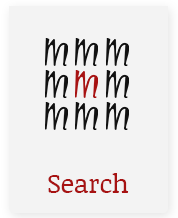
<style>
.page{position:relative;width:178px;height:218px;background:#f3f3f3}
.page>*{position:absolute;margin:0}
.t1{font:27px "NoticiaText-Regular";letter-spacing:-0.02em;color:#a71212}
</style>
<div class="page">
<p class="t1" style="left:48px;top:173px;width:81px;height:20px">Search</p>
</div>
